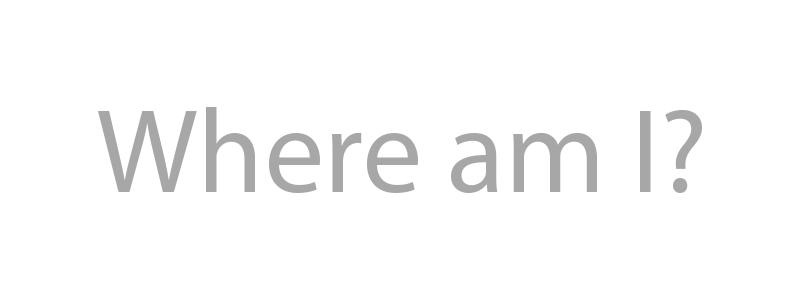
<style>
.page{position:relative;width:800px;height:300px;background:#ffffff}
.page>*{position:absolute;margin:0}
.t1{font:120px "MyriadPro-Regular";color:#a7a7a7}
</style>
<div class="page">
<p class="t1" style="left:98px;top:107px;width:604px;height:86px">Where am I?</p>
</div>
